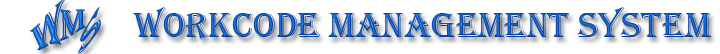
<style>
.page{position:relative;width:720px;height:54px;background:#ffffff}
.page>*{position:absolute;margin:0}
.t1{font:45.4px "Algerian";scale:0.89 1}
.t2{font:36px "Algerian"}
.t3{font:36px "Algerian";color:#0f54b9}
</style>
<div class="page">
<p class="t1" style="left:29px;top:0px;width:36px;height:51px;rotate:-4deg">w</p>
<p class="t2" style="left:132px;top:6px;width:580px;height:34px">Workcode Management System</p>
<p class="t2" style="left:59px;top:9px;width:27px;height:32px">m</p>
<p class="t3" style="left:77px;top:7px;width:24px;height:47px;rotate:4deg">s</p>
</div>
